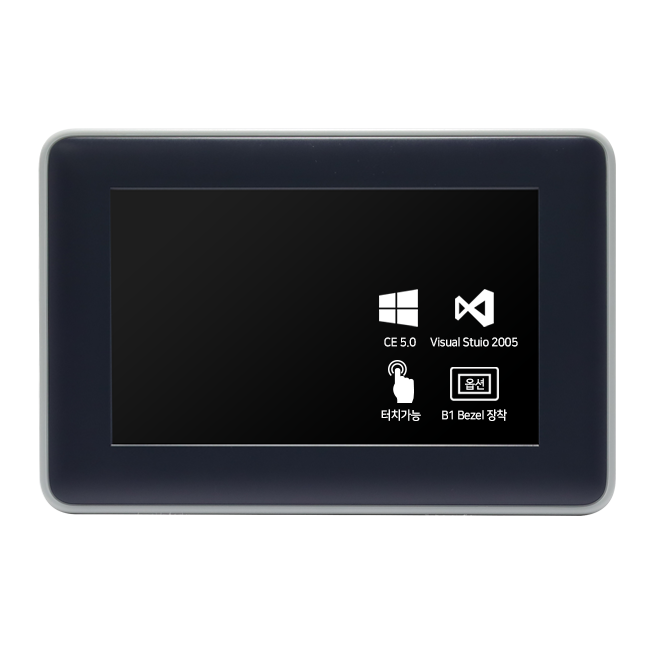
<style>
.page{position:relative;width:650px;height:650px;background:#ffffff}
.page>*{position:absolute;margin:0}
.t1{font:12px "NanumSquareB";letter-spacing:-0.03em;color:#ffffff;scale:0.95 1}
</style>
<div class="page">
<p class="t1" style="left:384px;top:337px;width:32px;height:10px">CE 5.0</p>
<p class="t1" style="left:430px;top:337px;width:88px;height:10px">Visual Stuio 2005</p>
<p class="t1" style="left:465px;top:378px;width:19px;height:12px">옵션</p>
<p class="t1" style="left:381px;top:409px;width:40px;height:12px">터치가능</p>
<p class="t1" style="left:442px;top:409px;width:65px;height:12px">B1 Bezel 장착</p>
</div>
